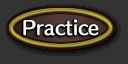
<style>
.page{position:relative;width:128px;height:64px;background:#333333}
.page>*{position:absolute;margin:0}
.t1{font:18px "FOTHummingStd-B";color:#ffffff;scale:0.95 1}
</style>
<div class="page">
<p class="t1" style="left:23px;top:19px;width:76px;height:17px">Practice</p>
</div>
